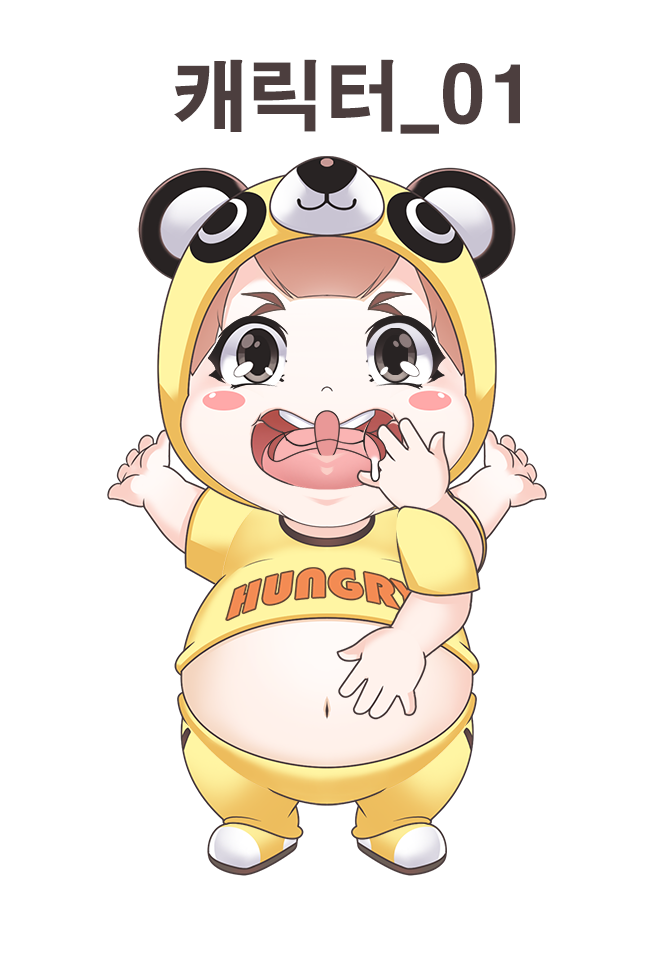
<style>
.page{position:relative;width:654px;height:960px;background:#ffffff}
.page>*{position:absolute;margin:0}
.t1{font:76.9px "H2gtrE";color:#4c3e3e}
</style>
<div class="page">
<p class="t1" style="left:174px;top:59px;width:346px;height:75px">캐릭터_01</p>
</div>
